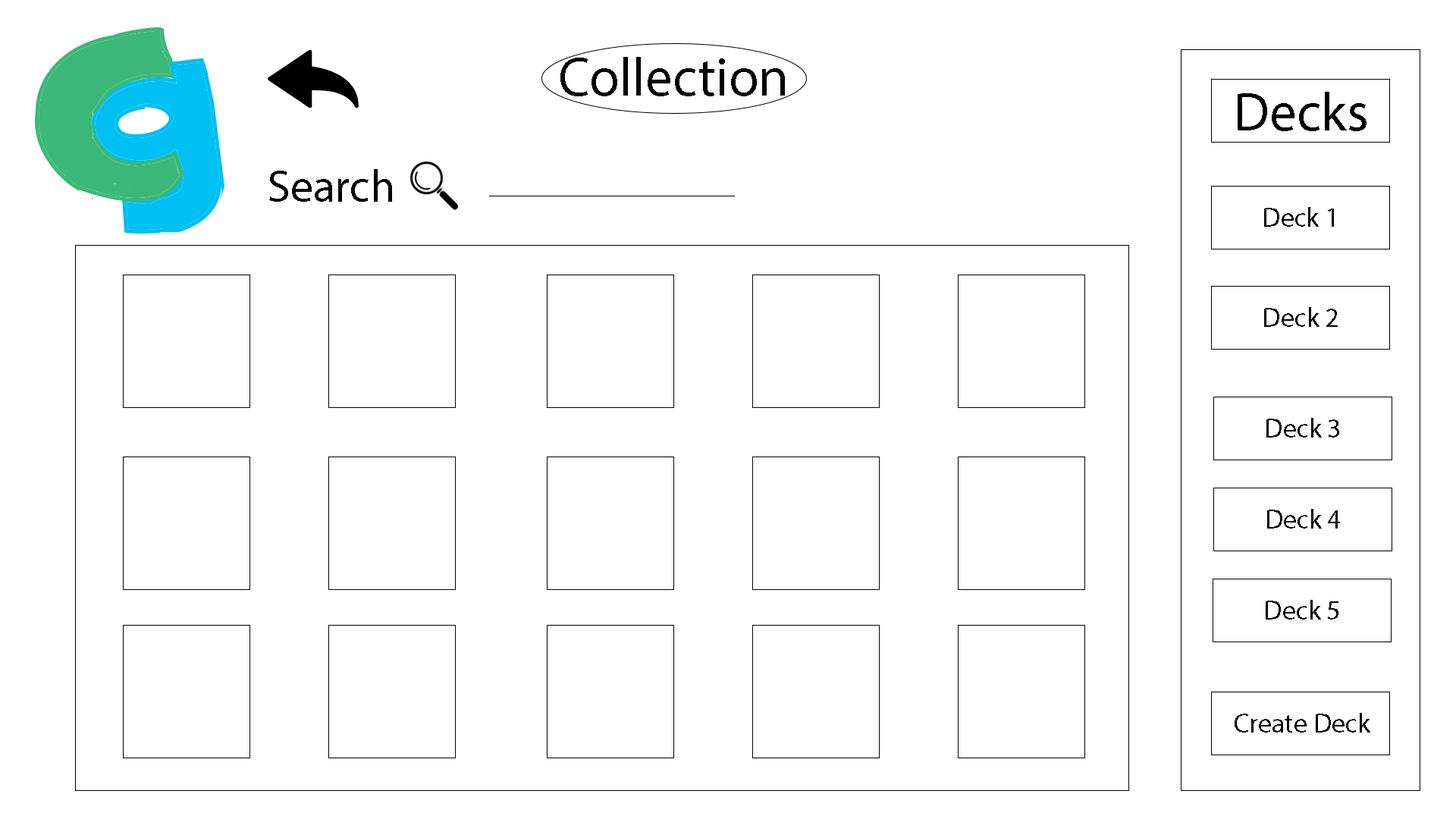
<style>
.page{position:relative;width:1456px;height:819px;background:#ffffff}
.page>*{position:absolute;margin:0}
.t1{font:54.6px "MyriadPro-Regular";color:#000000}
.t2{font:45.5px "MyriadPro-Regular";color:#000000}
.t3{font:27.3px "MyriadPro-Regular";color:#000000}
</style>
<div class="page">
<p class="t1" style="left:560px;top:57px;width:225px;height:39px">Collection</p>
<p class="t1" style="left:1238px;top:92px;width:128px;height:39px">Decks</p>
<p class="t2" style="left:269px;top:169px;width:123px;height:33px">Search</p>
<p class="t3" style="left:1264px;top:207px;width:70px;height:20px">Deck 1</p>
<p class="t3" style="left:1264px;top:307px;width:74px;height:20px">Deck 2</p>
<p class="t3" style="left:1266px;top:418px;width:73px;height:20px">Deck 3</p>
<p class="t3" style="left:1267px;top:509px;width:73px;height:20px">Deck 4</p>
<p class="t3" style="left:1266px;top:600px;width:72px;height:20px">Deck 5</p>
<p class="t3" style="left:1235px;top:713px;width:135px;height:20px">Create Deck</p>
</div>
